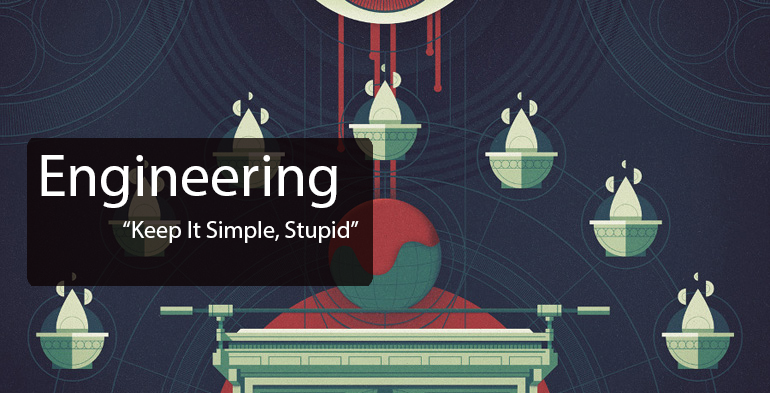
<style>
.page{position:relative;width:770px;height:393px}
.page>*{position:absolute;margin:0}
.t1{font:60px "MyriadPro-Regular";color:#ffffff}
.t2{font:24px "MyriadPro-Regular";color:#ffffff}
</style>
<div class="page">
<p class="t1" style="left:41px;top:155px;width:296px;height:53px">Engineering</p>
<p class="t2" style="left:123px;top:221px;width:236px;height:22px">“Keep It Simple, Stupid”</p>
</div>
